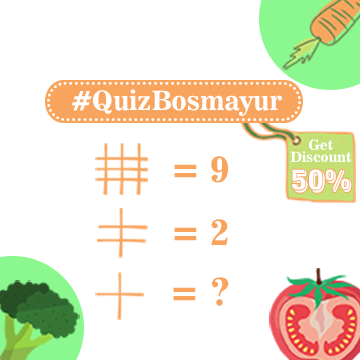
<style>
.page{position:relative;width:360px;height:360px;background:#ffffff}
.page>*{position:absolute;margin:0}
.t1{font:26.4px "News706BT-BoldC";color:#ffffff}
.t2{font:13.9px/11.5px "News706BT-BoldC";color:#ffffff}
.t3{font:37px "News706BT-BoldC";color:#f8a45d}
.t4{font:28.4px "POSTOFFICE";color:#ffffff;scale:0.65 1}
</style>
<div class="page">
<p class="t1" style="left:71px;top:89px;width:211px;height:27px">#QuizBosmayur</p>
<p class="t2" style="left:290px;top:139px;width:61px;height:23px;text-align:center">Get<br>Discount</p>
<p class="t3" style="left:174px;top:156px;width:54px;height:27px">= 9</p>
<p class="t4" style="left:292px;top:169px;width:60px;height:24px">50%</p>
<p class="t3" style="left:174px;top:219px;width:54px;height:26px">= 2</p>
<p class="t3" style="left:173px;top:277px;width:56px;height:29px">= ?</p>
</div>
